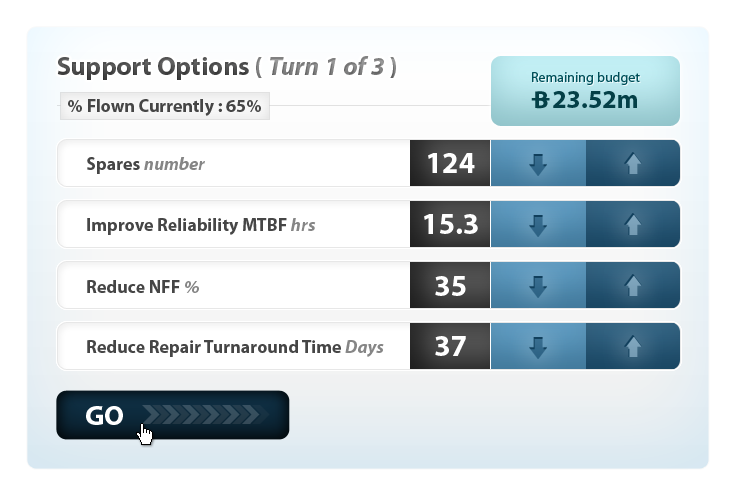
<style>
.page{position:relative;width:738px;height:498px;background:#ffffff}
.page>*{position:absolute;margin:0}
.t1{font:26px "MyriadPro-Bold";color:#464646}
.t2{font:26px "MyriadPro-Bold";color:#898989}
.t3{font:26px "MyriadPro-BoldIt";color:#898989}
.t4{font:14px "MyriadPro-Regular";color:#004f59}
.t5{font:18px "MyriadPro-Bold";color:#464646}
.t6{font:26px "MyriadPro-Bold";color:#044047}
.t7{font:18px "MyriadPro-BoldIt";color:#868686}
.t8{font:30px "MyriadPro-Bold";color:#ffffff}
.t9{font:28px "MyriadPro-Bold";color:#ffffff}
</style>
<div class="page">
<p class="t1" style="left:57px;top:56px;width:339px;height:24px">Support Options <span class="t2">( </span><span class="t3">Turn 1 of 3 </span><span class="t2">)</span></p>
<p class="t4" style="left:532px;top:72px;width:108px;height:13px">Remaining budget</p>
<p class="t5" style="left:68px;top:99px;width:193px;height:17px">% Flown Currently : 65%</p>
<p class="t6" style="left:553px;top:91px;width:84px;height:17px">23.52m</p>
<p class="t5" style="left:87px;top:157px;width:118px;height:17px">Spares <span class="t7">number</span></p>
<p class="t8" style="left:428px;top:153px;width:47px;height:20px">124</p>
<p class="t5" style="left:87px;top:218px;width:229px;height:17px">Improve Reliability MTBF <span class="t7">hrs</span></p>
<p class="t8" style="left:424px;top:214px;width:54px;height:20px">15.3</p>
<p class="t5" style="left:87px;top:280px;width:112px;height:13px">Reduce NFF <span class="t7">%</span></p>
<p class="t8" style="left:435px;top:276px;width:31px;height:20px">35</p>
<p class="t5" style="left:87px;top:340px;width:297px;height:17px">Reduce Repair Turnaround Time <span class="t7">Days</span></p>
<p class="t8" style="left:435px;top:336px;width:31px;height:20px">37</p>
<p class="t9" style="left:86px;top:406px;width:37px;height:19px">GO</p>
</div>
